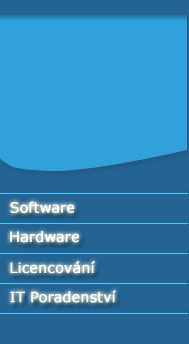
<style>
.page{position:relative;width:189px;height:344px;background:#30a1db}
.page>*{position:absolute;margin:0}
.t1{font:14px "Verdana";color:#ffffff;font-weight:bold}
</style>
<div class="page">
<p class="t1" style="left:10px;top:201px;width:65px;height:12px">Software</p>
<p class="t1" style="left:10px;top:231px;width:69px;height:12px">Hardware</p>
<p class="t1" style="left:10px;top:261px;width:85px;height:13px">Licencování</p>
<p class="t1" style="left:10px;top:290px;width:106px;height:13px">IT Poradenství</p>
</div>
